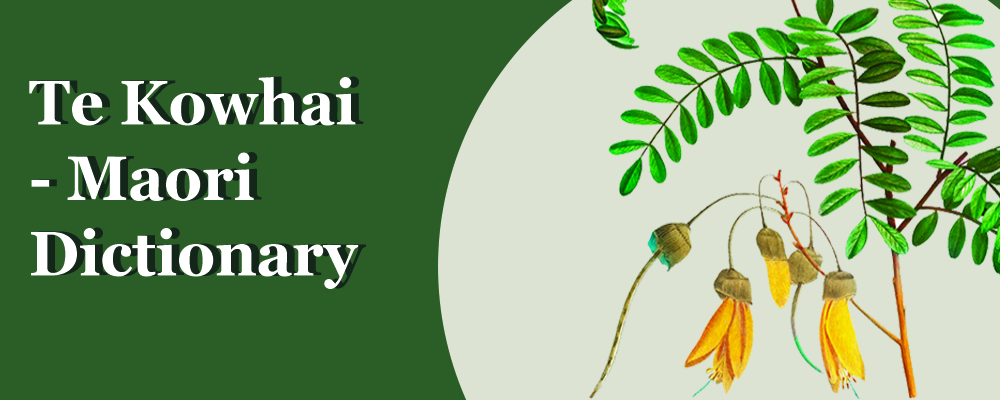
<style>
.page{position:relative;width:1000px;height:400px;background:#2a5e26}
.page>*{position:absolute;margin:0}
.t1{font:62.9px "Georgia-Bold";color:#ffffff;scale:0.95 1}
</style>
<div class="page">
<p class="t1" style="left:29px;top:77px;width:330px;height:212px">Te Kowhai - Maori Dictionary</p>
</div>
